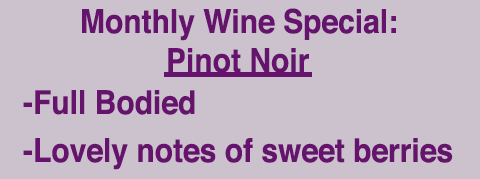
<style>
.page{position:relative;width:480px;height:179px;background:#ccc2cd}
.page>*{position:absolute;margin:0}
.t1{font:33px "Helvetica-Bold";color:#65136d;scale:0.91 1}
.t2{font:33px/24px "Helvetica-Bold";color:#65136d;scale:0.91 1}
</style>
<div class="page">
<p class="t1" style="left:82px;top:8px;width:314px;height:33px">Monthly Wine Special:</p>
<p class="t1" style="left:168px;top:48px;width:141px;height:25px">Pinot Noir</p>
<p class="t2" style="left:23px;top:90px;width:430px;height:80px">-Full Bodied<br><br>-Lovely notes of sweet berries</p>
</div>
